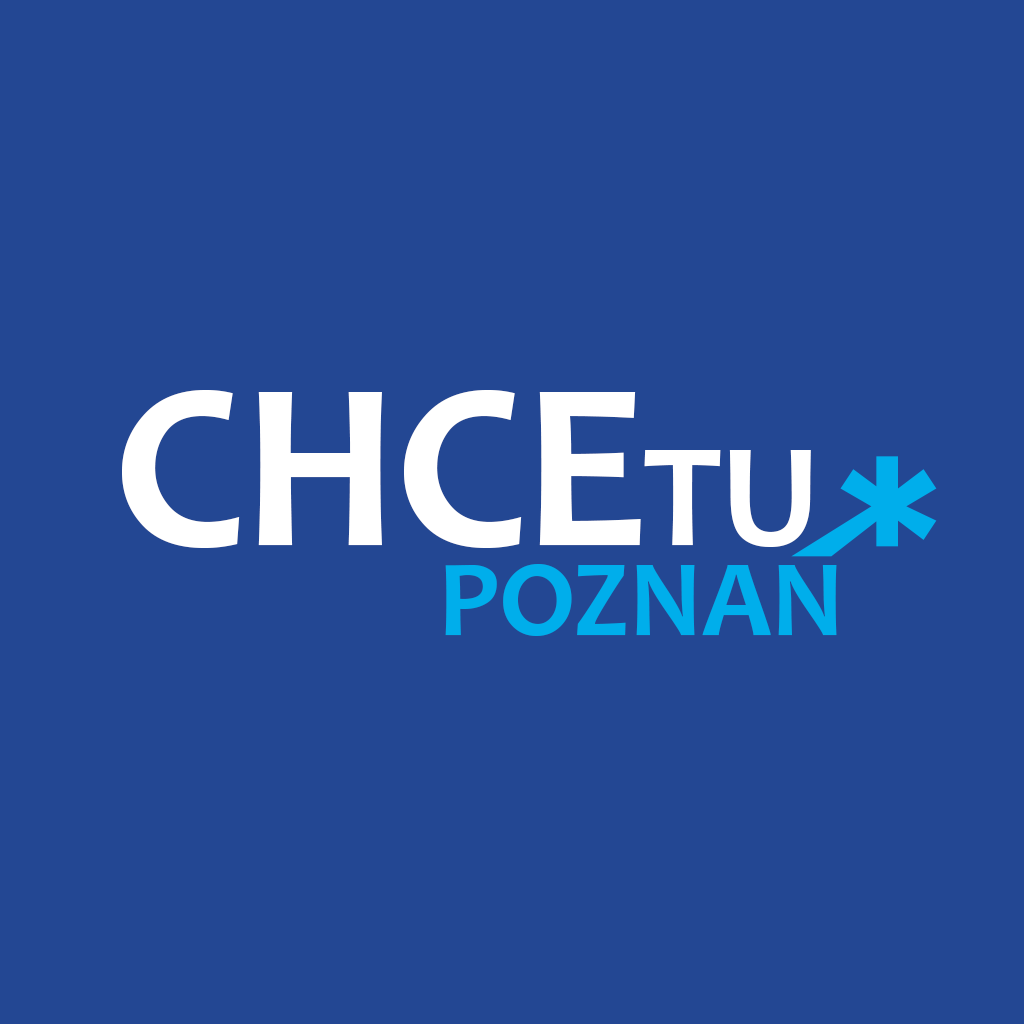
<style>
.page{position:relative;width:1024px;height:1024px;background:#234793}
.page>*{position:absolute;margin:0}
.t1{font:240px "Candara-Bold";color:#ffffff}
.t2{font:150px "Candara-Bold";color:#ffffff}
.t3{font:110px "Candara-Bold";color:#00aeeb}
</style>
<div class="page">
<p class="t1" style="left:122px;top:390px;width:689px;height:158px">CHCE<span class="t2">TU</span></p>
<p class="t3" style="left:445px;top:564px;width:392px;height:72px">POZNAN</p>
</div>
